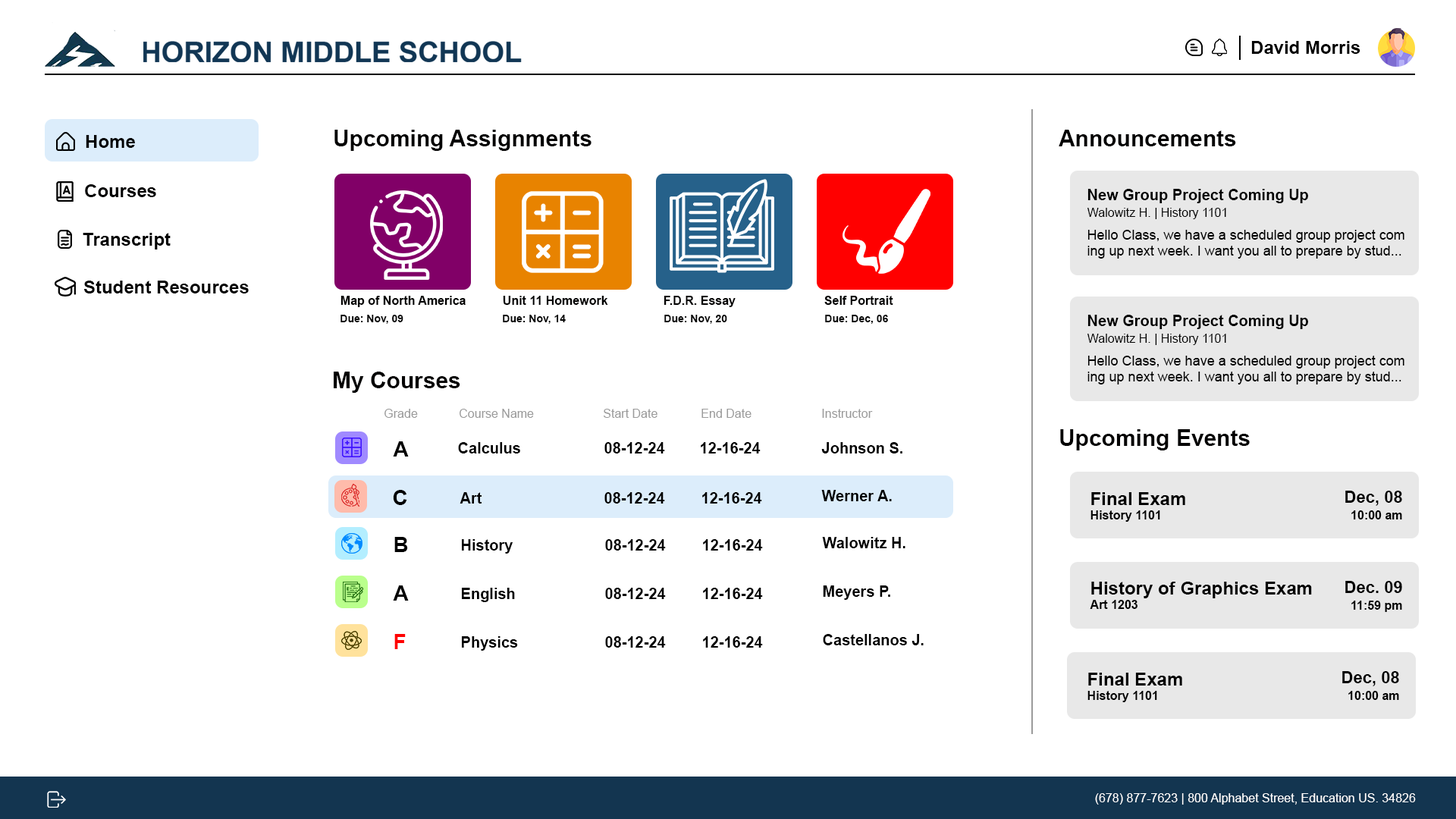
<style>
.page{position:relative;width:1456px;height:819px;background:#ffffff}
.page>*{position:absolute;margin:0}
.t1{font:18.2px "Arial-BoldMT";color:#000000}
.t2{font:22.7px "Arial-BoldMT";color:#010000}
.t3{font:18.2px "Arial-BoldMT";color:#010000}
.t4{font:15.2px "Arial-BoldMT";color:#000000}
.t5{font:12.1px "ArialMT";color:#000000}
.t6{font:13.6px "ArialMT";color:#000000}
.t7{font:12.1px "Arial-BoldMT";color:#010000}
.t8{font:10.6px "Arial-BoldMT";color:#000000}
.t9{font:12.1px "ArialMT";color:#9b9b9b}
.t10{font:21.2px "Arial-BoldMT";color:#000000}
.t11{font:12.1px "Arial-BoldMT";color:#000000}
.t12{font:16.7px "Arial-BoldMT";color:#000000}
.t13{font:21.2px "Arial-BoldMT";color:#ff0000}
.t14{font:12.1px "ArialMT";color:#ffffff}
</style>
<div class="page">
<p class="t1" style="left:1251px;top:41px;width:109px;height:13px">David Morris</p>
<p class="t1" style="left:86px;top:135px;width:49px;height:13px">Home</p>
<p class="t2" style="left:334px;top:130px;width:257px;height:21px">Upcoming Assignments</p>
<p class="t2" style="left:1059px;top:130px;width:177px;height:16px">Announcements</p>
<p class="t3" style="left:85px;top:184px;width:71px;height:13px">Courses</p>
<p class="t4" style="left:1087px;top:189px;width:221px;height:14px">New Group Project Coming Up</p>
<p class="t5" style="left:1087px;top:208px;width:139px;height:11px">Walowitz H. | History 1101</p>
<p class="t1" style="left:83px;top:233px;width:88px;height:16px">Transcript</p>
<p class="t6" style="left:1087px;top:230px;width:317px;height:29px">Hello Class, we have a scheduled group project com<br>ing up next week. I want you all to prepare by stud...</p>
<p class="t1" style="left:83px;top:281px;width:166px;height:12px">Student Resources</p>
<p class="t7" style="left:340px;top:296px;width:126px;height:11px">Map of North America</p>
<p class="t7" style="left:503px;top:296px;width:105px;height:9px">Unit 11 Homework</p>
<p class="t7" style="left:664px;top:296px;width:72px;height:11px">F.D.R. Essay</p>
<p class="t7" style="left:824px;top:296px;width:69px;height:9px">Self Portrait</p>
<p class="t8" style="left:340px;top:315px;width:63px;height:9px">Due: Nov, 09</p>
<p class="t8" style="left:503px;top:315px;width:63px;height:9px">Due: Nov, 14</p>
<p class="t8" style="left:664px;top:315px;width:63px;height:9px">Due: Nov, 20</p>
<p class="t8" style="left:825px;top:315px;width:63px;height:9px">Due: Dec, 06</p>
<p class="t4" style="left:1087px;top:315px;width:221px;height:14px">New Group Project Coming Up</p>
<p class="t5" style="left:1087px;top:334px;width:139px;height:11px">Walowitz H. | History 1101</p>
<p class="t6" style="left:1087px;top:356px;width:317px;height:28px">Hello Class, we have a scheduled group project com<br>ing up next week. I want you all to prepare by stud...</p>
<p class="t2" style="left:334px;top:372px;width:126px;height:21px">My Courses</p>
<p class="t9" style="left:384px;top:409px;width:34px;height:9px">Grade</p>
<p class="t9" style="left:460px;top:409px;width:74px;height:9px">Course Name</p>
<p class="t9" style="left:604px;top:409px;width:53px;height:9px">Start Date</p>
<p class="t9" style="left:701px;top:409px;width:50px;height:9px">End Date</p>
<p class="t9" style="left:822px;top:409px;width:51px;height:9px">Instructor</p>
<p class="t2" style="left:1060px;top:429px;width:190px;height:21px">Upcoming Events</p>
<p class="t10" style="left:393px;top:441px;width:16px;height:16px">A</p>
<p class="t4" style="left:458px;top:442px;width:62px;height:11px">Calculus</p>
<p class="t4" style="left:604px;top:442px;width:61px;height:11px">08-12-24</p>
<p class="t4" style="left:701px;top:442px;width:60px;height:11px">12-16-24</p>
<p class="t4" style="left:821px;top:442px;width:81px;height:11px">Johnson S.</p>
<p class="t10" style="left:393px;top:490px;width:14px;height:15px">C</p>
<p class="t4" style="left:460px;top:492px;width:22px;height:12px">Art</p>
<p class="t4" style="left:604px;top:492px;width:61px;height:12px">08-12-24</p>
<p class="t4" style="left:702px;top:492px;width:60px;height:12px">12-16-24</p>
<p class="t4" style="left:821px;top:490px;width:71px;height:11px">Werner A.</p>
<p class="t11" style="left:1090px;top:492px;width:95px;height:30px"><span class="t1">Final Exam<br></span>History 1101</p>
<p class="t12" style="left:1345px;top:491px;width:57px;height:15px">Dec, 08</p>
<p class="t11" style="left:1351px;top:510px;width:51px;height:9px">10:00 am</p>
<p class="t10" style="left:394px;top:537px;width:14px;height:15px">B</p>
<p class="t4" style="left:462px;top:539px;width:51px;height:15px">History</p>
<p class="t4" style="left:605px;top:539px;width:61px;height:12px">08-12-24</p>
<p class="t4" style="left:703px;top:539px;width:60px;height:12px">12-16-24</p>
<p class="t4" style="left:822px;top:537px;width:83px;height:11px">Walowitz H.</p>
<p class="t1" style="left:1090px;top:582px;width:222px;height:27px">History of Graphics Exam<br><span class="t11">Art 1203</span></p>
<p class="t12" style="left:1345px;top:581px;width:57px;height:12px">Dec. 09</p>
<p class="t10" style="left:393px;top:585px;width:16px;height:16px">A</p>
<p class="t4" style="left:462px;top:588px;width:53px;height:14px">English</p>
<p class="t4" style="left:605px;top:588px;width:61px;height:11px">08-12-24</p>
<p class="t4" style="left:703px;top:588px;width:60px;height:11px">12-16-24</p>
<p class="t4" style="left:823px;top:585px;width:67px;height:15px">Meyers P.</p>
<p class="t11" style="left:1351px;top:601px;width:51px;height:11px">11:59 pm</p>
<p class="t13" style="left:394px;top:634px;width:12px;height:15px">F</p>
<p class="t4" style="left:462px;top:636px;width:56px;height:15px">Physics</p>
<p class="t4" style="left:605px;top:636px;width:61px;height:12px">08-12-24</p>
<p class="t4" style="left:703px;top:636px;width:60px;height:12px">12-16-24</p>
<p class="t4" style="left:823px;top:634px;width:101px;height:11px">Castellanos J.</p>
<p class="t11" style="left:1087px;top:673px;width:95px;height:29px"><span class="t1">Final Exam<br></span>History 1101</p>
<p class="t12" style="left:1342px;top:671px;width:57px;height:15px">Dec, 08</p>
<p class="t11" style="left:1348px;top:691px;width:51px;height:9px">10:00 am</p>
<p class="t14" style="left:1095px;top:793px;width:321px;height:12px">(678) 877-7623 | 800 Alphabet Street, Education US. 34826</p>
</div>
